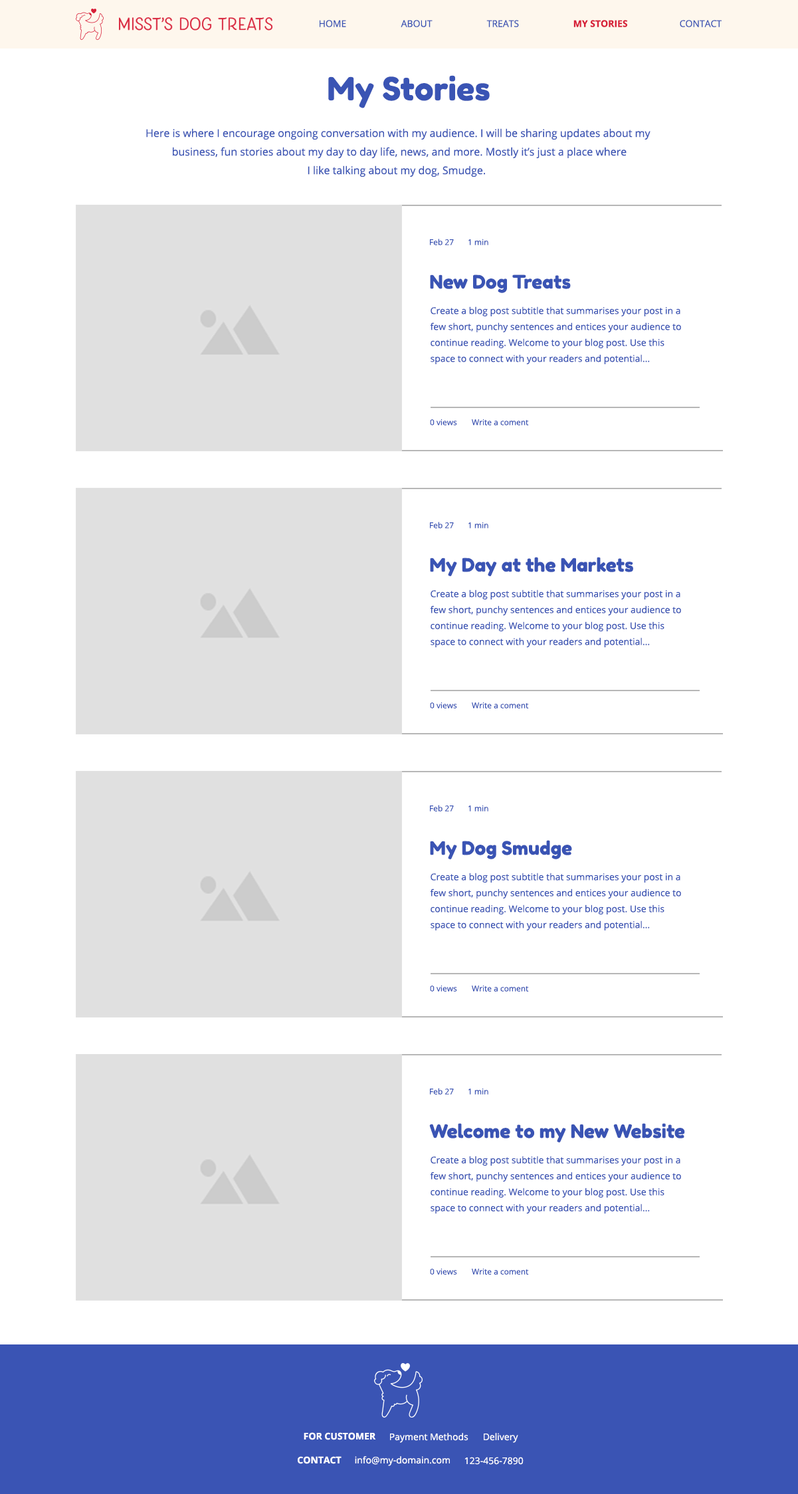
<style>
.page{position:relative;width:798px;height:1494px;background:#ffffff}
.page>*{position:absolute;margin:0}
.t1{font:9.3px "OpenSans-Regular";color:#3a54b4}
.t2{font:9.3px "OpenSans-Bold";color:#d71f38}
.t3{font:31.9px "FredokaOne-Regular";color:#3a54b4}
.t4{font:10.6px/18.6px "OpenSans-Regular";color:#3a54b4}
.t5{font:8px "OpenSans-Regular";color:#3a54b4}
.t6{font:18.6px "FredokaOne-Regular";color:#3a54b4}
.t7{font:9.3px/15.9px "OpenSans-Regular";color:#3a54b4}
.t8{font:9.3px "OpenSans-Bold";color:#ffffff}
.t9{font:9.3px "OpenSans-Regular";color:#ffffff}
</style>
<div class="page">
<p class="t1" style="left:320px;top:20px;width:26px;height:7px">HOME</p>
<p class="t1" style="left:401px;top:20px;width:32px;height:7px">ABOUT</p>
<p class="t1" style="left:486px;top:20px;width:33px;height:7px">TREATS</p>
<p class="t2" style="left:574px;top:20px;width:54px;height:7px">MY STORIES</p>
<p class="t1" style="left:680px;top:20px;width:42px;height:7px">CONTACT</p>
<p class="t3" style="left:328px;top:75px;width:162px;height:33px">My Stories</p>
<p class="t4" style="left:146px;top:128px;width:505px;height:49px;text-align:center">Here is where I encourage ongoing conversation with my audience. I will be sharing updates about my <br>business, fun stories about my day to day life, news, and more. Mostly it’s just a place where<br>I like talking about my dog, Smudge.</p>
<p class="t5" style="left:430px;top:239px;width:24px;height:6px">Feb 27</p>
<p class="t5" style="left:469px;top:239px;width:19px;height:6px">1 min</p>
<p class="t6" style="left:430px;top:274px;width:141px;height:19px">New Dog Treats</p>
<p class="t7" style="left:430px;top:306px;width:251px;height:58px">Create a blog post subtitle that summarises your post in a <br>few short, punchy sentences and entices your audience to <br>continue reading. Welcome to your blog post. Use this <br>space to connect with your readers and potential...</p>
<p class="t5" style="left:430px;top:419px;width:27px;height:6px">0 views</p>
<p class="t5" style="left:472px;top:419px;width:57px;height:6px">Write a coment</p>
<p class="t5" style="left:430px;top:522px;width:24px;height:6px">Feb 27</p>
<p class="t5" style="left:469px;top:522px;width:19px;height:6px">1 min</p>
<p class="t6" style="left:430px;top:557px;width:203px;height:19px">My Day at the Markets</p>
<p class="t7" style="left:430px;top:589px;width:251px;height:58px">Create a blog post subtitle that summarises your post in a <br>few short, punchy sentences and entices your audience to <br>continue reading. Welcome to your blog post. Use this <br>space to connect with your readers and potential...</p>
<p class="t5" style="left:430px;top:702px;width:27px;height:6px">0 views</p>
<p class="t5" style="left:472px;top:702px;width:57px;height:6px">Write a coment</p>
<p class="t5" style="left:430px;top:805px;width:24px;height:6px">Feb 27</p>
<p class="t5" style="left:469px;top:805px;width:19px;height:6px">1 min</p>
<p class="t6" style="left:430px;top:840px;width:142px;height:19px">My Dog Smudge</p>
<p class="t7" style="left:430px;top:873px;width:251px;height:57px">Create a blog post subtitle that summarises your post in a <br>few short, punchy sentences and entices your audience to <br>continue reading. Welcome to your blog post. Use this <br>space to connect with your readers and potential...</p>
<p class="t5" style="left:430px;top:985px;width:27px;height:7px">0 views</p>
<p class="t5" style="left:472px;top:985px;width:57px;height:7px">Write a coment</p>
<p class="t5" style="left:430px;top:1088px;width:24px;height:7px">Feb 27</p>
<p class="t5" style="left:469px;top:1088px;width:19px;height:7px">1 min</p>
<p class="t6" style="left:429px;top:1123px;width:256px;height:19px">Welcome to my New Website</p>
<p class="t7" style="left:430px;top:1156px;width:251px;height:58px">Create a blog post subtitle that summarises your post in a <br>few short, punchy sentences and entices your audience to <br>continue reading. Welcome to your blog post. Use this <br>space to connect with your readers and potential...</p>
<p class="t5" style="left:430px;top:1268px;width:27px;height:7px">0 views</p>
<p class="t5" style="left:472px;top:1268px;width:57px;height:7px">Write a coment</p>
<p class="t8" style="left:304px;top:1432px;width:72px;height:8px">FOR CUSTOMER</p>
<p class="t9" style="left:390px;top:1433px;width:79px;height:10px">Payment Methods</p>
<p class="t9" style="left:484px;top:1433px;width:34px;height:10px">Delivery</p>
<p class="t8" style="left:298px;top:1456px;width:44px;height:8px">CONTACT</p>
<p class="t9" style="left:355px;top:1456px;width:95px;height:10px">info@my-domain.com</p>
<p class="t9" style="left:465px;top:1457px;width:59px;height:8px">123-456-7890</p>
</div>
